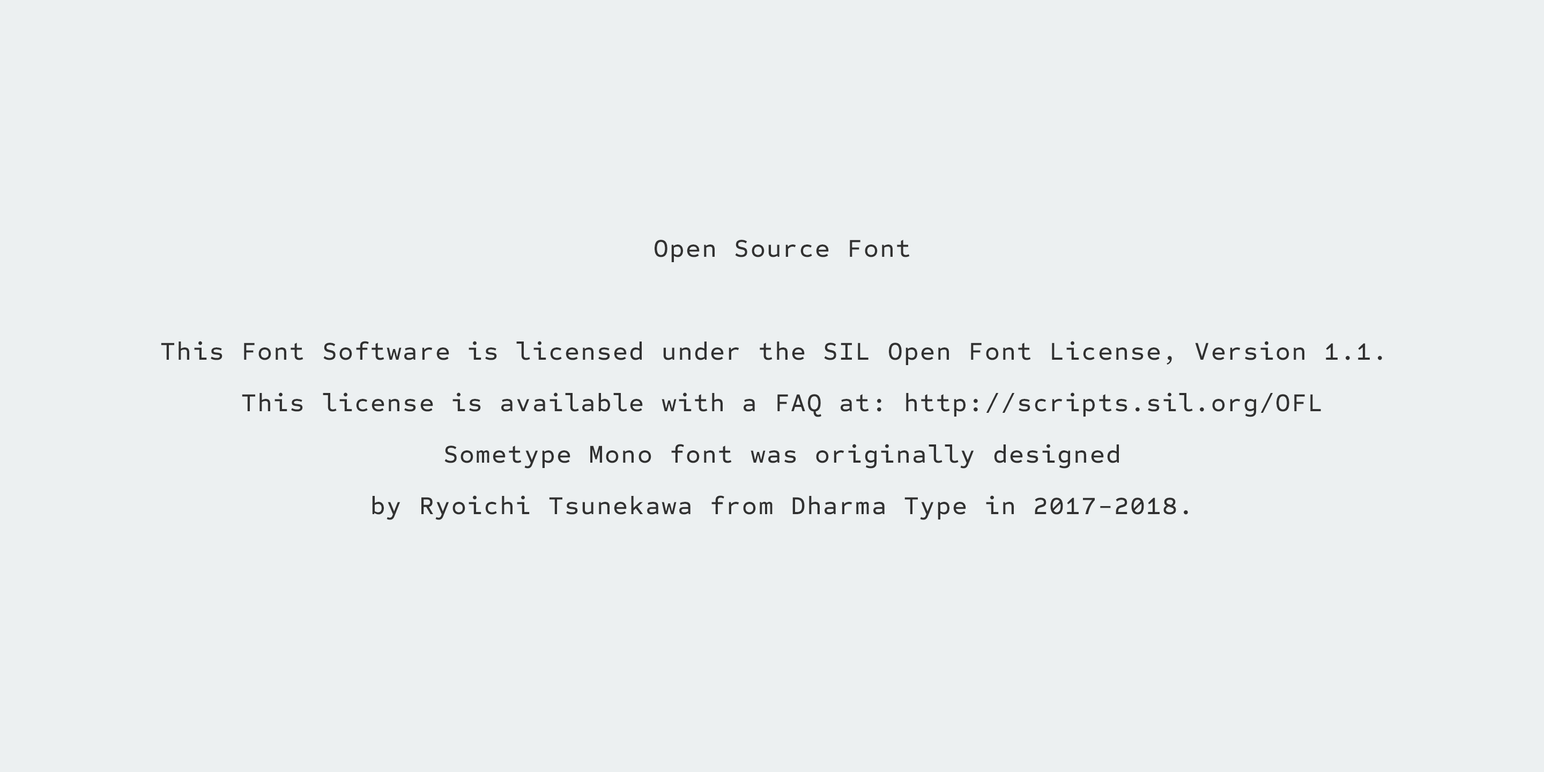
<style>
.page{position:relative;width:1544px;height:772px;background:#ecf0f1}
.page>*{position:absolute;margin:0}
.t1{font:25.7px/51.5px "SometypeMono-Medium";letter-spacing:0.048em;color:#313131}
</style>
<div class="page">
<p class="t1" style="left:161px;top:240px;width:1221px;height:280px;text-align:center">Open Source Font<br><br>This Font Software is licensed under the SIL Open Font License, Version 1.1. <br>This license is available with a FAQ at: http://scripts.sil.org/OFL<br>Sometype Mono font was originally designed<br>by Ryoichi Tsunekawa from Dharma Type in 2017-2018.</p>
</div>
